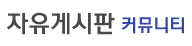
<style>
.page{position:relative;width:192px;height:46px;background:#ffffff}
.page>*{position:absolute;margin:0}
.t1{font:24px "RixHeadM";color:#49494b}
.t2{font:18px "RixHeadM";color:#344ba4}
</style>
<div class="page">
<p class="t1" style="left:7px;top:12px;width:108px;height:23px">자유게시판</p>
<p class="t2" style="left:121px;top:17px;width:63px;height:17px">커뮤니티</p>
</div>
